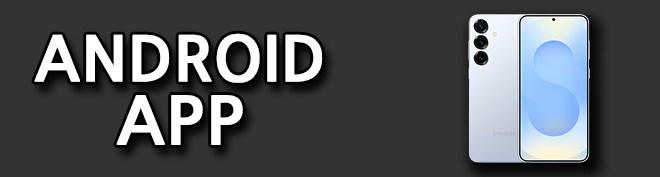
<style>
.page{position:relative;width:660px;height:177px;background:#333333}
.page>*{position:absolute;margin:0}
.t1{font:61.3px/60px "NanumGothicOTFBold";color:#ffffff;font-weight:bold}
.t2{font:65.2px/57.3px "NanumGothicOTFBold";color:#ffffff;font-weight:bold}
</style>
<div class="page">
<p class="t1" style="left:34px;top:33px;width:289px;height:112px;text-align:center">ANDROID<br><span class="t2">APP</span></p>
</div>
